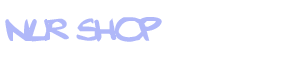
<style>
.page{position:relative;width:300px;height:60px;background:#ffffff}
.page>*{position:absolute;margin:0}
.t1{font:60px "Texted'critureLanfeust";color:#b0b8f9}
</style>
<div class="page">
<p class="t1" style="left:5px;top:17px;width:157px;height:25px">nur shop</p>
</div>
